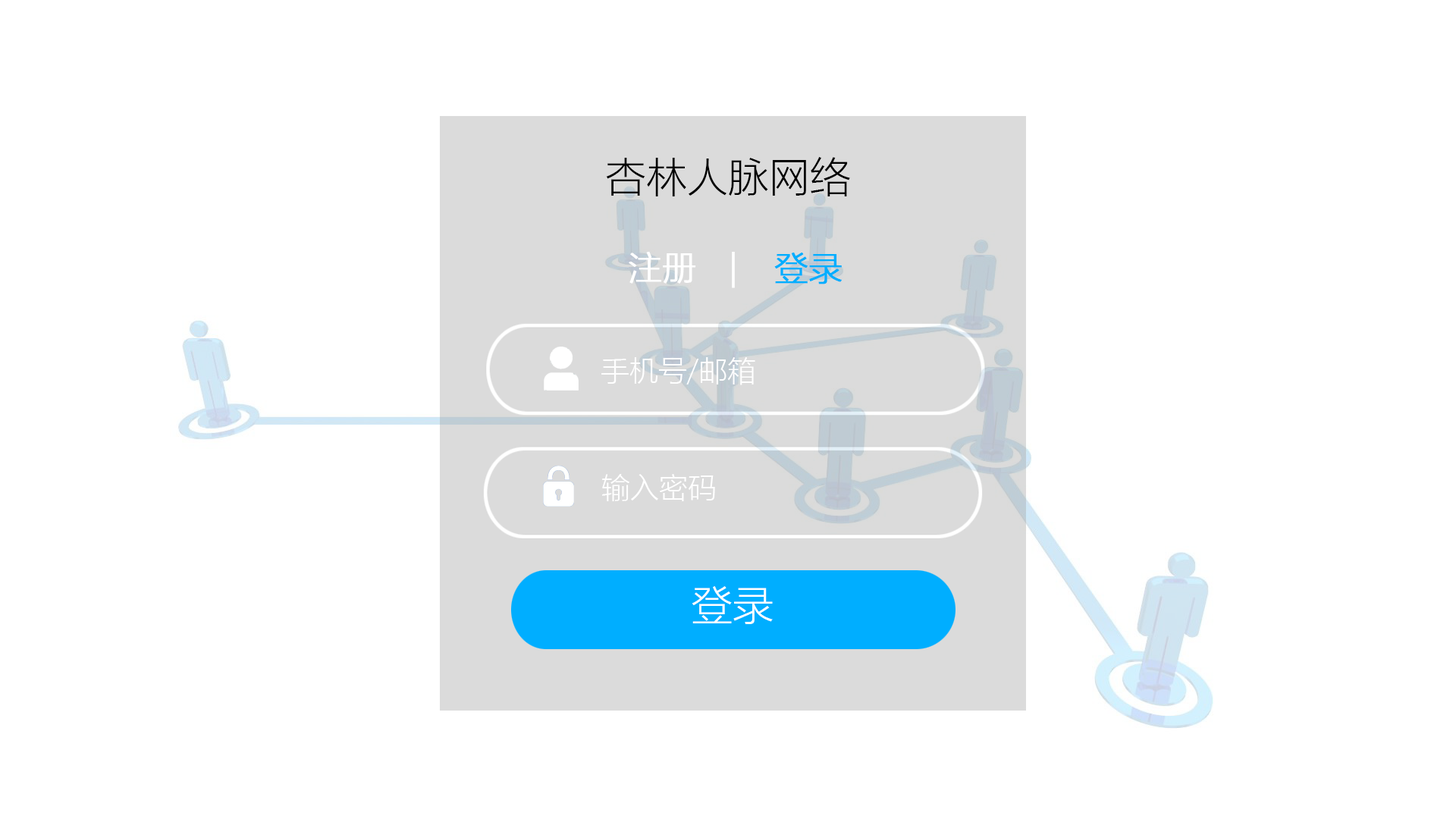
<style>
.page{position:relative;width:1456px;height:819px;background:#ffffff}
.page>*{position:absolute;margin:0}
.t1{font:40.9px "MicrosoftYaHeiLight";color:#000000}
.t2{font:33.4px "MicrosoftYaHeiLight";color:#ffffff;font-weight:bold}
.t3{font:33.4px "MicrosoftYaHeiLight";color:#00aeff;font-weight:bold}
.t4{font:28.8px "MicrosoftYaHeiLight";color:#ffffff}
.t5{font:40.9px "MicrosoftYaHeiLight";color:#ffffff}
</style>
<div class="page">
<p class="t1" style="left:606px;top:157px;width:244px;height:39px">杏林人脉网络</p>
<p class="t2" style="left:629px;top:252px;width:106px;height:36px">注册   |</p>
<p class="t3" style="left:774px;top:253px;width:68px;height:31px">登录</p>
<p class="t4" style="left:601px;top:357px;width:154px;height:28px">手机号/邮箱</p>
<p class="t4" style="left:602px;top:474px;width:113px;height:27px">输入密码</p>
<p class="t5" style="left:692px;top:586px;width:81px;height:38px">登录</p>
</div>
